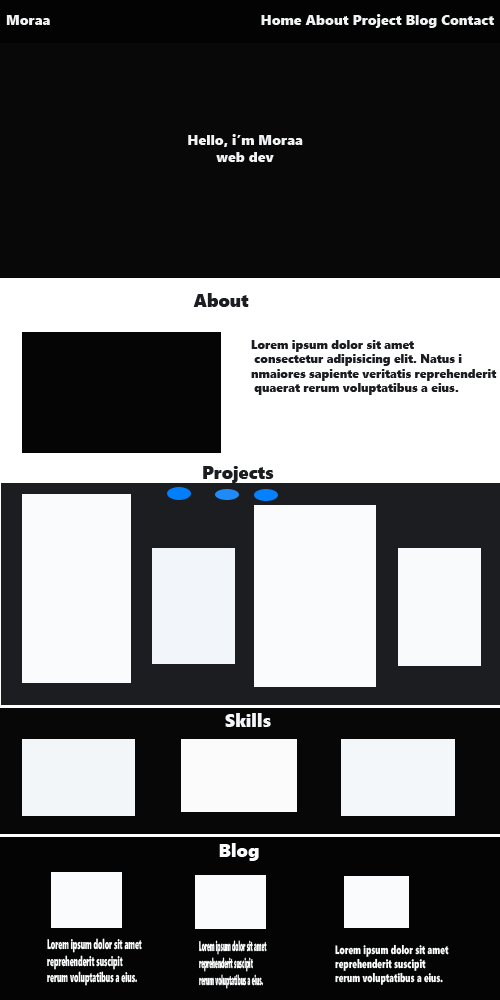
<style>
.page{position:relative;width:500px;height:1000px;background:#080808}
.page>*{position:absolute;margin:0}
.t1{font:14px "SegoeUIBlack";color:#f0f2f3}
.t2{font:18px "SegoeUIBlack";color:#1b1d20}
.t3{font:18px "SegoeUIBlack";color:#f3f5f7}
.t4{font:18px "SegoeUIBlack";color:#f9fbfc}
.t5{font:13.7px "SegoeUIBlack";color:#f9fbfc;scale:0.51 1}
.t6{font:14px "SegoeUIBlack";color:#f9fbfc;scale:0.35 1}
.t7{font:12px "SegoeUIBlack";color:#f9fbfc;scale:0.7 1}
</style>
<div class="page">
<p class="t1" style="left:6px;top:14px;width:488px;height:14px">Moraa                                                      Home About Project Blog Contact</p>
<p class="t1" style="left:188px;top:134px;width:115px;height:28px;text-align:center">Hello, i’m Moraa<br>web dev</p>
<p class="t2" style="left:193px;top:293px;width:56px;height:14px">About</p>
<p class="t2" style="left:203px;top:466px;width:71px;height:17px">Projects</p>
<p class="t3" style="left:225px;top:713px;width:46px;height:14px">Skills</p>
<p class="t4" style="left:219px;top:843px;width:40px;height:18px">Blog</p>
<p class="t5" style="left:47px;top:938px;width:95px;height:48px">Lorem ipsum dolor sit amet <br>reprehenderit suscipit <br>rerum voluptatibus a eius.</p>
<p class="t6" style="left:199px;top:940px;width:68px;height:49px">Lorem ipsum dolor sit amet <br>reprehenderit suscipit <br>rerum voluptatibus a eius.</p>
<p class="t7" style="left:335px;top:944px;width:114px;height:41px">Lorem ipsum dolor sit amet <br>reprehenderit suscipit <br>rerum voluptatibus a eius.</p>
</div>
